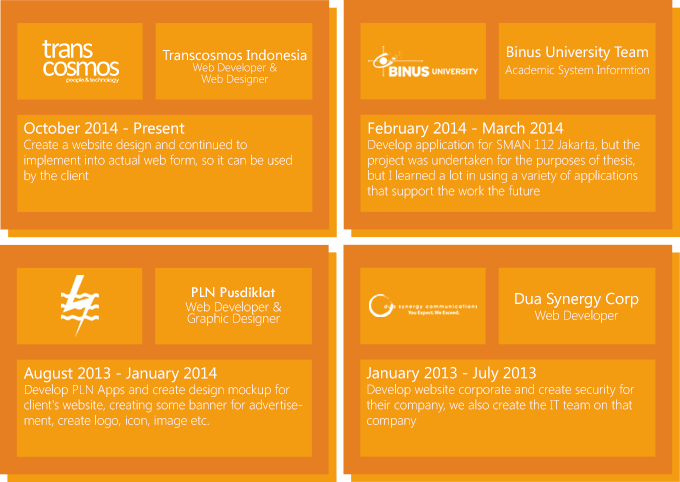
<style>
.page{position:relative;width:680px;height:482px;background:#f39c12}
.page>*{position:absolute;margin:0}
.t1{font:11.4px/11.5px "SegoeUI-Light";color:#ffffff}
.t2{font:14.2px/11.5px "SegoeUI";color:#ffffff}
.t3{font:12.1px/17.2px "SegoeUI-Light";color:#ffffff}
.t4{font:15px/17.2px "SegoeUI";color:#ffffff}
.t5{font:12.9px "SegoeUI-Light";color:#ffffff}
.t6{font:15.7px "SegoeUI";color:#ffffff}
.t7{font:15.7px "TwCenMT-Regular";color:#ffffff}
.t8{font:15.7px/15.7px "SegoeUI";color:#ffffff}
.t9{font:12.9px/15.7px "SegoeUI-Light";color:#ffffff}
.t10{font:12.9px/11.5px "SegoeUI-Light";color:#ffffff}
</style>
<div class="page">
<p class="t1" style="left:162px;top:49px;width:145px;height:37px;text-align:center"><span class="t2">Transcosmos Indonesia<br></span>Web Developer &amp;<br>Web Designer</p>
<p class="t3" style="left:505px;top:46px;width:144px;height:31px;text-align:center"><span class="t4">Binus University Team<br></span>Academic System Informtion</p>
<p class="t5" style="left:24px;top:121px;width:268px;height:62px"><span class="t6">October 2014 - Present <br></span>Create a website design and continued to<br>implement into actual web form, so it can be used by the client</p>
<p class="t5" style="left:367px;top:121px;width:273px;height:78px"><span class="t6">February 2014 - March 2014<br></span>Develop application for SMAN 112 Jakarta, but the project was undertaken for the purposes of thesis, but I learned a lot in using a variety of applications that support the work the future</p>
<p class="t7" style="left:192px;top:287px;width:83px;height:11px">PLN Pusdiklat</p>
<p class="t8" style="left:515px;top:292px;width:124px;height:31px;text-align:center">Dua Synergy Corp<br><span class="t9">Web Developer</span></p>
<p class="t10" style="left:185px;top:301px;width:97px;height:25px;text-align:center">Web Developer &amp;<br>Graphic Designer</p>
<p class="t5" style="left:366px;top:366px;width:268px;height:62px"><span class="t6">January 2013 - July 2013<br></span>Develop website corporate and create security for their company, we also create the IT team on that company</p>
<p class="t5" style="left:24px;top:367px;width:279px;height:61px"><span class="t6">August 2013 - January 2014<br></span>Develop PLN Apps and create design mockup for client's website, creating some banner for advertisement, create logo, icon, image etc.</p>
</div>
